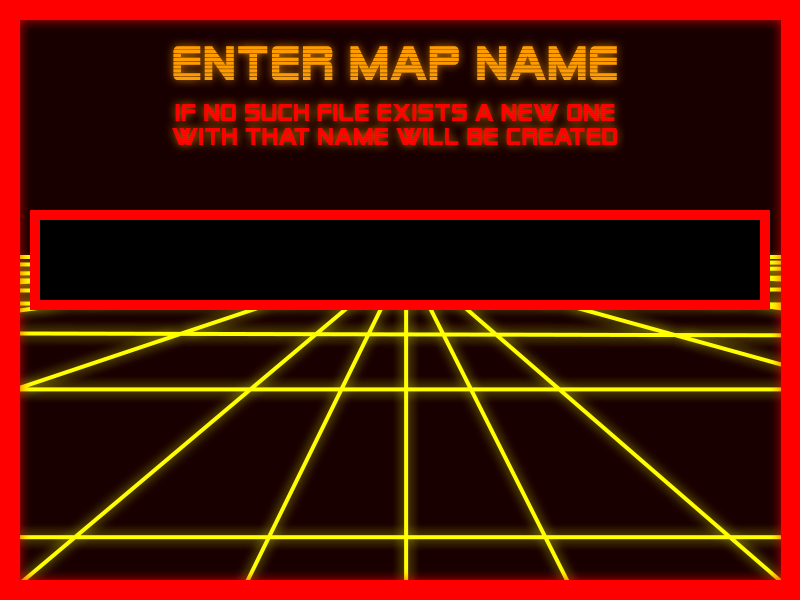
<style>
.page{position:relative;width:800px;height:600px;background:#190000}
.page>*{position:absolute;margin:0}
.t1{font:48px "AlienEncounters";letter-spacing:0.04em;color:#ff9c00}
.t2{font:24px/24px "AlienEncounters";letter-spacing:0.04em;color:#ff0000}
</style>
<div class="page">
<p class="t1" style="left:173px;top:46px;width:444px;height:34px">enter map name</p>
<p class="t2" style="left:172px;top:104px;width:445px;height:41px;text-align:center">If no such file exists a new one<br>with that name will be created</p>
</div>
